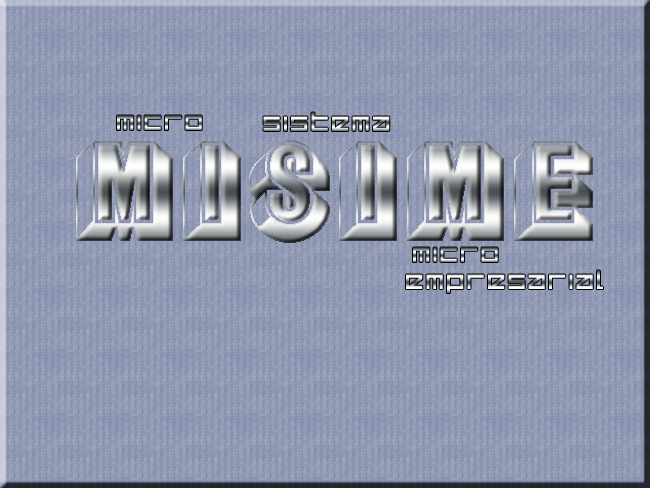
<style>
.page{position:relative;width:650px;height:488px}
.page>*{position:absolute;margin:0}
.t1{font:30px "Delta-Ray"}
</style>
<div class="page">
<p class="t1" style="left:263px;top:112px;width:127px;height:19px">Sistema</p>
<p class="t1" style="left:117px;top:115px;width:85px;height:15px">Micro</p>
<p class="t1" style="left:413px;top:247px;width:85px;height:15px">Micro</p>
<p class="t1" style="left:406px;top:270px;width:197px;height:23px">Empresarial</p>
</div>
